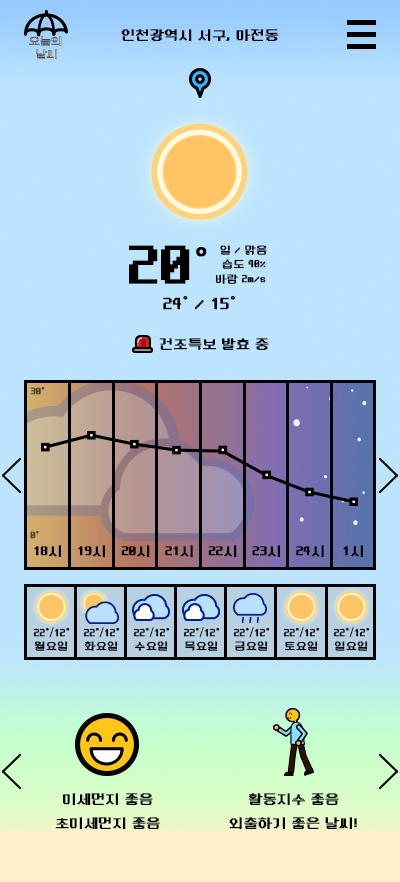
<style>
.page{position:relative;width:400px;height:882px;background:#bde4ff}
.page>*{position:absolute;margin:0}
.t1{font:14px "NeoDunggeunmoPro-Regular";color:#000000;font-weight:bold}
.t2{font:60px "NeoDunggeunmoPro-Regular";color:#000000;font-weight:bold}
.t3{font:48px "Gulim";color:#000000;font-weight:bold}
.t4{font:11px "NeoDunggeunmoPro-Regular";color:#000000;font-weight:bold}
.t5{font:18px "NeoDunggeunmoPro-Regular";color:#000000;font-weight:bold}
.t6{font:18px "Gulim";color:#000000;font-weight:bold}
.t7{font:10px "NeoDunggeunmoPro-Regular";color:#534227;font-weight:bold}
.t8{font:10px "Gulim";color:#534227;font-weight:bold}
.t9{font:10px "NeoDunggeunmoPro-Regular";color:#544327;font-weight:bold}
.t10{font:10px "Gulim";color:#544327;font-weight:bold}
.t11{font:11px "Gulim";color:#000000;font-weight:bold}
.t12{font:14px/24px "NeoDunggeunmoPro-Regular";color:#000000;font-weight:bold}
</style>
<div class="page">
<p class="t1" style="left:121px;top:29px;width:158px;height:12px">인천광역시 서구, 마전동</p>
<p class="t2" style="left:129px;top:245px;width:78px;height:39px">20<span class="t3">˚</span></p>
<p class="t4" style="left:220px;top:245px;width:47px;height:10px">일 / 맑음</p>
<p class="t4" style="left:222px;top:259px;width:44px;height:10px">습도 40%</p>
<p class="t4" style="left:215px;top:274px;width:51px;height:10px">바람 2m/s</p>
<p class="t5" style="left:163px;top:296px;width:72px;height:14px">24<span class="t6">˚ </span>/ 15<span class="t6">˚</span></p>
<p class="t1" style="left:159px;top:338px;width:110px;height:12px">건조특보 발효 중</p>
<p class="t7" style="left:30px;top:387px;width:15px;height:8px">30<span class="t8">˚</span></p>
<p class="t9" style="left:30px;top:531px;width:9px;height:8px">0<span class="t10">˚</span></p>
<p class="t1" style="left:34px;top:545px;width:27px;height:12px">18시</p>
<p class="t1" style="left:78px;top:545px;width:27px;height:12px">19시</p>
<p class="t1" style="left:121px;top:545px;width:29px;height:12px">20시</p>
<p class="t1" style="left:165px;top:545px;width:28px;height:12px">21시</p>
<p class="t1" style="left:208px;top:545px;width:29px;height:12px">22시</p>
<p class="t1" style="left:252px;top:545px;width:28px;height:12px">23시</p>
<p class="t1" style="left:296px;top:545px;width:28px;height:12px">24시</p>
<p class="t1" style="left:343px;top:545px;width:20px;height:12px">1시</p>
<p class="t4" style="left:33px;top:627px;width:36px;height:11px">22<span class="t11">˚/</span>12<span class="t11">˚</span></p>
<p class="t4" style="left:83px;top:627px;width:36px;height:11px">22<span class="t11">˚/</span>12<span class="t11">˚</span></p>
<p class="t4" style="left:133px;top:627px;width:36px;height:11px">22<span class="t11">˚/</span>12<span class="t11">˚</span></p>
<p class="t4" style="left:183px;top:627px;width:36px;height:11px">22<span class="t11">˚/</span>12<span class="t11">˚</span></p>
<p class="t4" style="left:233px;top:627px;width:36px;height:11px">22<span class="t11">˚/</span>12<span class="t11">˚</span></p>
<p class="t4" style="left:283px;top:627px;width:36px;height:11px">22<span class="t11">˚/</span>12<span class="t11">˚</span></p>
<p class="t4" style="left:333px;top:627px;width:36px;height:11px">22<span class="t11">˚/</span>12<span class="t11">˚</span></p>
<p class="t4" style="left:34px;top:641px;width:34px;height:10px">월요일</p>
<p class="t4" style="left:84px;top:641px;width:34px;height:10px">화요일</p>
<p class="t4" style="left:134px;top:641px;width:34px;height:10px">수요일</p>
<p class="t4" style="left:185px;top:641px;width:33px;height:10px">목요일</p>
<p class="t4" style="left:235px;top:641px;width:33px;height:10px">금요일</p>
<p class="t4" style="left:284px;top:641px;width:34px;height:10px">토요일</p>
<p class="t4" style="left:334px;top:641px;width:34px;height:10px">일요일</p>
<p class="t12" style="left:55px;top:793px;width:105px;height:36px;text-align:center">미세먼지 좋음<br>초미세먼지 좋음</p>
<p class="t12" style="left:229px;top:793px;width:128px;height:36px;text-align:center">활동지수 좋음<br>외출하기 좋은 날씨!</p>
</div>
